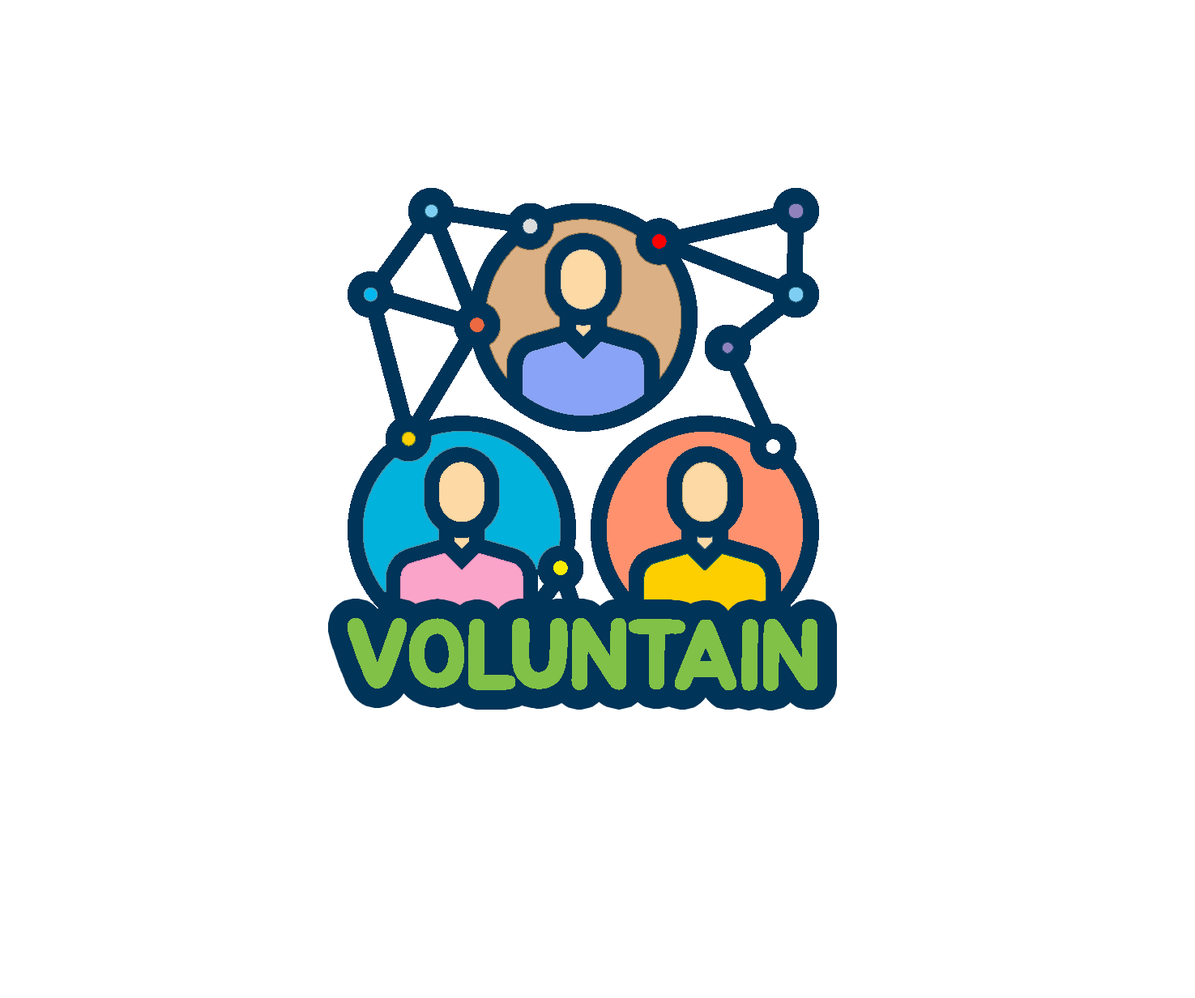
<style>
.page{position:relative;width:1195px;height:998px;background:#ffffff}
.page>*{position:absolute;margin:0}
.t1{font:162px "BMJUA";letter-spacing:-0.05em;color:#81c147;font-weight:bold}
</style>
<div class="page">
<p class="t1" style="left:348px;top:618px;width:469px;height:73px">VOLUNTAIN</p>
</div>
